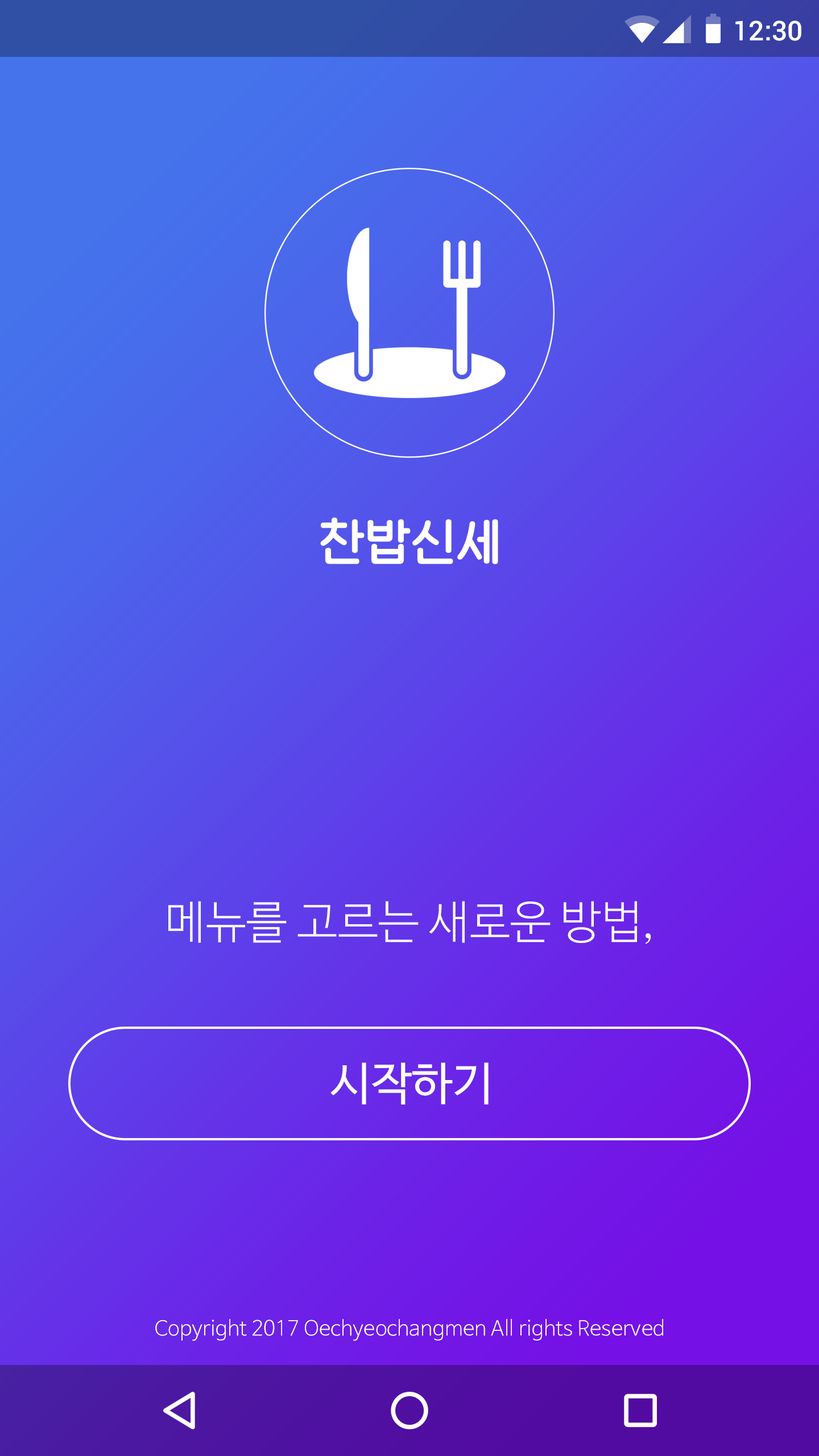
<style>
.page{position:relative;width:819px;height:1456px}
.page>*{position:absolute;margin:0}
.t1{font:27.3px "Roboto-Medium";color:#ffffff}
.t2{font:45.5px "NanumBarunGothicLight";color:#ffffff}
.t3{font:45.5px "NanumBarunGothic";color:#ffffff}
.t4{font:20.5px "NanumBarunGothicLight";color:#ffffff}
</style>
<div class="page">
<p class="t1" style="left:735px;top:20px;width:66px;height:21px">12:30</p>
<p class="t2" style="left:168px;top:901px;width:483px;height:43px">메뉴를 고르는 새로운 방법,</p>
<p class="t3" style="left:330px;top:1062px;width:159px;height:42px">시작하기</p>
<p class="t4" style="left:155px;top:1319px;width:508px;height:22px">Copyright 2017 Oechyeochangmen All rights Reserved</p>
</div>
